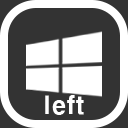
<style>
.page{position:relative;width:128px;height:128px;background:#333333}
.page>*{position:absolute;margin:0}
.t1{font:24px "H2gtrE";color:#ffffff}
</style>
<div class="page">
<p class="t1" style="left:45px;top:95px;width:39px;height:20px">left</p>
</div>
